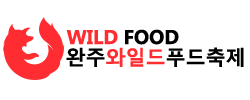
<style>
.page{position:relative;width:250px;height:100px;background:#ffffff}
.page>*{position:absolute;margin:0}
.t1{font:20px "MicrosoftPhagsPa-Bold";color:#ff2d31}
.t2{font:20px "MicrosoftPhagsPa-Bold";color:#010101}
.t3{font:20px "MalgunGothicBold";color:#000000}
.t4{font:20px "MalgunGothicBold";color:#ff2d31}
</style>
<div class="page">
<p class="t1" style="left:66px;top:29px;width:113px;height:16px">WILD <span class="t2">FOOD</span></p>
<p class="t3" style="left:66px;top:47px;width:178px;height:20px">완주<span class="t4">와일드</span>푸드축제</p>
</div>
